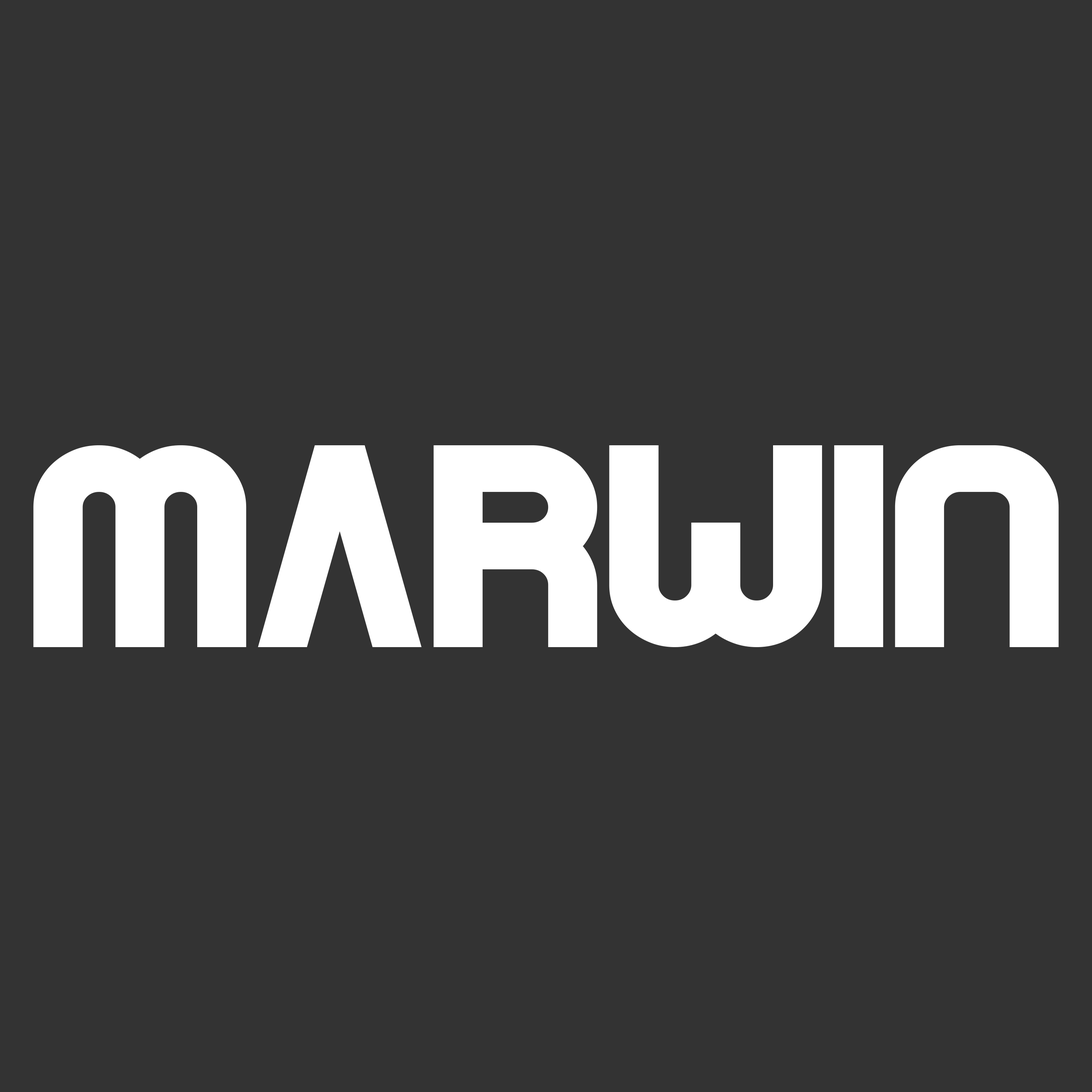
<style>
.page{position:relative;width:1092px;height:1092px;background:#333333}
.page>*{position:absolute;margin:0}
.t1{font:288.5px "Regular";color:#ffffff;text-transform:uppercase;scale:1.05 1}
</style>
<div class="page">
<p class="t1" style="left:33px;top:445px;width:1026px;height:202px">marwin</p>
</div>
